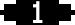
<style>
.page{position:relative;width:75px;height:25px;background:#000000}
.page>*{position:absolute;margin:0}
.t1{font:50px "Thintel";color:#ffffff}
</style>
<div class="page">
<p class="t1" style="left:33px;top:1px;width:10px;height:22px">1</p>
</div>
